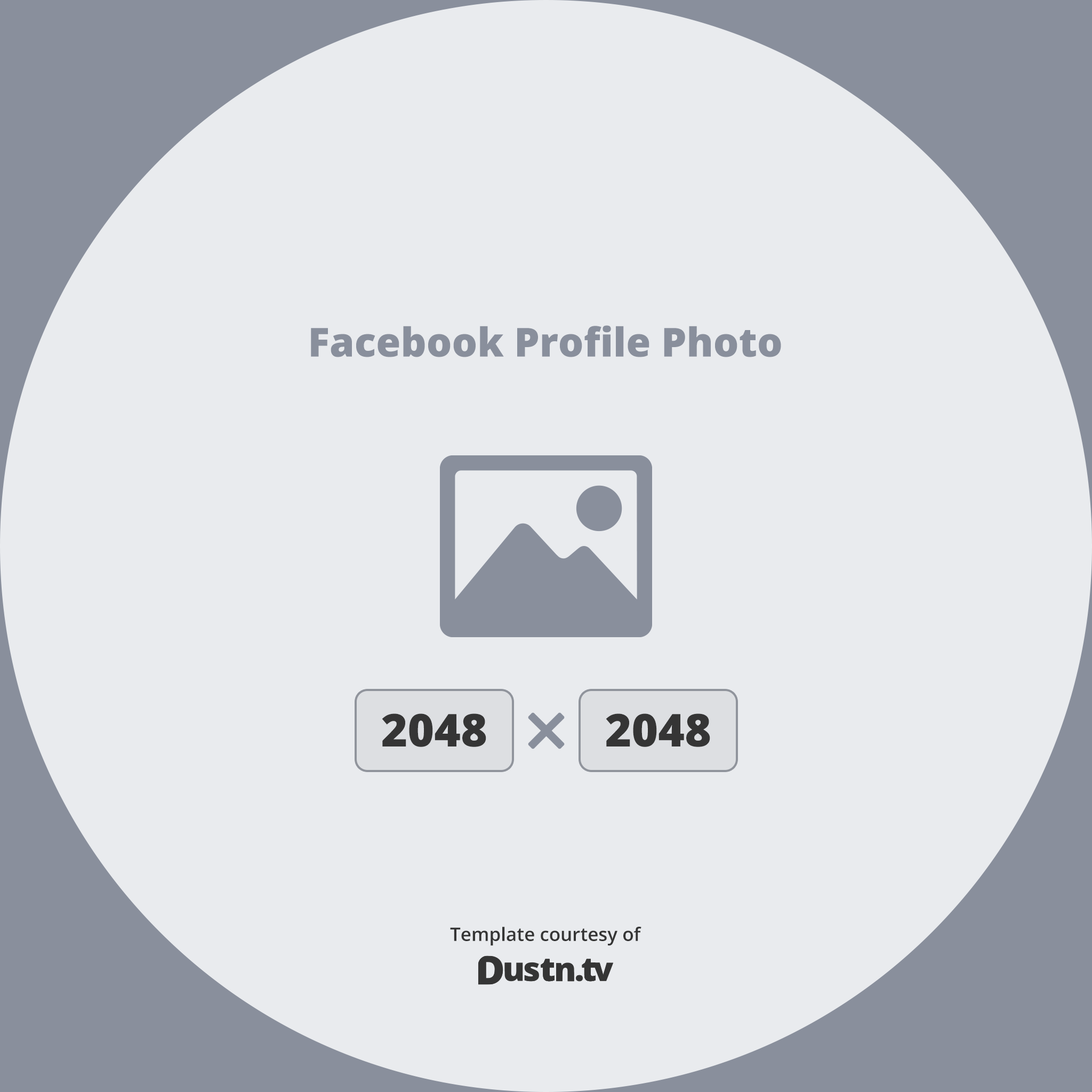
<style>
.page{position:relative;width:1092px;height:1092px;background:#e9ebee}
.page>*{position:absolute;margin:0}
.t1{font:40px "OpenSans-Extrabold";color:#898f9c}
.t2{font:45.3px "OpenSans-Extrabold";color:#353535}
.t3{font:18.7px "OpenSans-Semibold";color:#353535}
</style>
<div class="page">
<p class="t1" style="left:311px;top:325px;width:470px;height:32px">Facebook Profile Photo</p>
<p class="t2" style="left:382px;top:713px;width:104px;height:34px">2048</p>
<p class="t2" style="left:606px;top:713px;width:104px;height:34px">2048</p>
<p class="t3" style="left:450px;top:927px;width:191px;height:19px">Template courtesy of</p>
</div>
